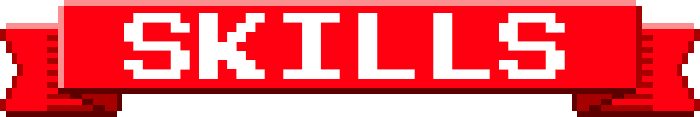
<style>
.page{position:relative;width:700px;height:117px;background:#ff0011}
.page>*{position:absolute;margin:0}
.t1{font:75px "PressStart2P-Regular";color:#ffffff}
</style>
<div class="page">
<p class="t1" style="left:124px;top:13px;width:441px;height:66px">SKILLS</p>
</div>
